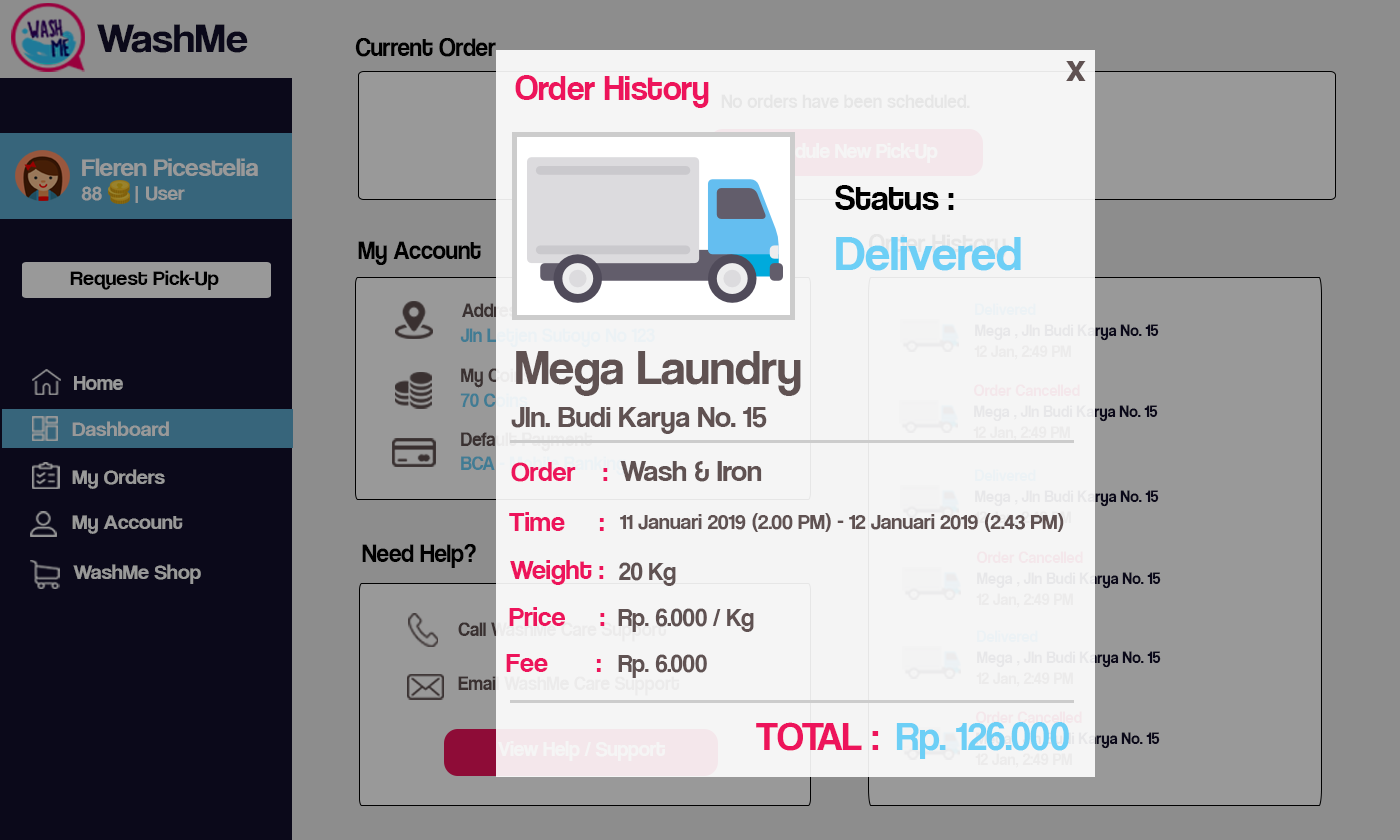
<style>
.page{position:relative;width:1400px;height:840px;background:#8d8d8d}
.page>*{position:absolute;margin:0}
.t1{font:42.1px "CoolveticaRg-Regular";color:#120f2b;scale:1.05 1}
.t2{font:25.5px "CoolveticaRg-Regular";color:#000000;scale:0.96 1}
.t3{font:40px "CoolveticaRg-Regular";color:#605252}
.t4{font:35px "CoolveticaRg-Regular";color:#ed145b}
.t5{font:19.9px "CoolveticaRg-Regular";color:#e6e6e6;scale:0.96 1}
.t6{font:21.3px "CoolveticaRg-Regular";color:#ffffff;scale:0.96 1}
.t7{font:25.2px "CoolveticaRg-Regular";color:#999999;scale:1.05 1}
.t8{font:20px "CoolveticaRg-Regular";color:#999999;scale:1.05 1}
.t9{font:50px "CoolveticaRg-Regular";color:#6dcff6}
.t10{font:36px "CoolveticaRg-Regular";color:#000000}
.t11{font:25.5px "CoolveticaRg-Regular";scale:0.96 1}
.t12{font:21px "CoolveticaRg-Regular";color:#000000;scale:1.05 1}
.t13{font:19.9px "CoolveticaRg-Regular";scale:0.96 1}
.t14{font:17px "CoolveticaRg-Regular";color:#ecf2f5;scale:0.96 1}
.t15{font:50px "CoolveticaRg-Regular";color:#605252}
.t16{font:17px "CoolveticaRg-Regular";color:#ecebeb;scale:0.96 1}
.t17{font:21px "CoolveticaRg-Regular";color:#999999}
.t18{font:17px "CoolveticaRg-Regular";color:#f4e7eb;scale:0.96 1}
.t19{font:30px "CoolveticaRg-Regular";color:#605252}
.t20{font:21px "CoolveticaRg-Regular";color:#999999;scale:1.05 1}
.t21{font:28px "CoolveticaRg-Regular";color:#ed145b}
.t22{font:21.7px "CoolveticaRg-Regular";color:#605252}
.t23{font:25px "CoolveticaRg-Regular";color:#605252}
.t24{font:40px "CoolveticaRg-Regular";color:#ed145b}
.t25{font:40px "CoolveticaRg-Regular";color:#6dcff6}
</style>
<div class="page">
<p class="t1" style="left:97px;top:24px;width:151px;height:29px">WashMe</p>
<p class="t2" style="left:355px;top:38px;width:141px;height:19px">Current Order</p>
<p class="t3" style="left:1066px;top:61px;width:20px;height:20px">x</p>
<p class="t4" style="left:515px;top:75px;width:194px;height:33px">Order History</p>
<p class="t5" style="left:721px;top:94px;width:249px;height:14px">No orders have been scheduled.</p>
<p class="t6" style="left:753px;top:143px;width:185px;height:20px">Schedule New Pick-Up</p>
<p class="t7" style="left:81px;top:158px;width:177px;height:45px">Fleren Picestelia<br><span class="t8">88      | User</span></p>
<p class="t9" style="left:835px;top:185px;width:186px;height:86px"><span class="t10">Status :<br></span>Delivered</p>
<p class="t2" style="left:358px;top:241px;width:123px;height:24px">My Account</p>
<p class="t11" style="left:868px;top:234px;width:138px;height:24px">Order History</p>
<p class="t12" style="left:70px;top:270px;width:149px;height:20px">Request Pick-Up</p>
<p class="t13" style="left:462px;top:303px;width:65px;height:14px">Address</p>
<p class="t14" style="left:975px;top:303px;width:61px;height:12px">Delivered</p>
<p class="t15" style="left:516px;top:351px;width:285px;height:45px">Mega Laundry</p>
<p class="t16" style="left:974px;top:345px;width:97px;height:15px">12 Jan, 2:49 PM</p>
<p class="t17" style="left:74px;top:376px;width:49px;height:14px">Home</p>
<p class="t13" style="left:461px;top:368px;width:71px;height:20px">My Coins</p>
<p class="t18" style="left:973px;top:384px;width:107px;height:12px">Order Cancelled</p>
<p class="t19" style="left:511px;top:407px;width:256px;height:27px">Jln. Budi Karya No. 15</p>
<p class="t20" style="left:72px;top:421px;width:97px;height:15px">Dashboard</p>
<p class="t21" style="left:511px;top:462px;width:97px;height:20px">Order    :</p>
<p class="t19" style="left:620px;top:461px;width:142px;height:21px">Wash &amp; Iron</p>
<p class="t20" style="left:72px;top:469px;width:93px;height:20px">My Orders</p>
<p class="t14" style="left:975px;top:469px;width:61px;height:12px">Delivered</p>
<p class="t20" style="left:72px;top:515px;width:111px;height:19px">My Account</p>
<p class="t21" style="left:509px;top:512px;width:95px;height:19px">Time     :</p>
<p class="t22" style="left:620px;top:513px;width:444px;height:19px">11 Januari 2019 (2.00 PM) - 12 Januari 2019 (2.43 PM)</p>
<p class="t2" style="left:362px;top:544px;width:114px;height:24px">Need Help?</p>
<p class="t18" style="left:976px;top:551px;width:107px;height:12px">Order Cancelled</p>
<p class="t20" style="left:73px;top:564px;width:128px;height:20px">WashMe Shop</p>
<p class="t21" style="left:510px;top:560px;width:94px;height:25px">Weight :</p>
<p class="t23" style="left:619px;top:562px;width:57px;height:24px">20 Kg</p>
<p class="t16" style="left:976px;top:593px;width:97px;height:15px">12 Jan, 2:49 PM</p>
<p class="t21" style="left:509px;top:607px;width:96px;height:19px">Price     :</p>
<p class="t23" style="left:618px;top:608px;width:136px;height:24px">Rp. 6.000 / Kg</p>
<p class="t14" style="left:977px;top:630px;width:61px;height:12px">Delivered</p>
<p class="t21" style="left:506px;top:654px;width:95px;height:18px">Fee       :</p>
<p class="t23" style="left:618px;top:654px;width:89px;height:24px">Rp. 6.000</p>
<p class="t16" style="left:976px;top:672px;width:97px;height:15px">12 Jan, 2:49 PM</p>
<p class="t18" style="left:975px;top:711px;width:107px;height:12px">Order Cancelled</p>
<p class="t24" style="left:756px;top:722px;width:123px;height:29px">TOTAL :</p>
<p class="t25" style="left:896px;top:722px;width:173px;height:37px">Rp. 126.000</p>
<p class="t6" style="left:498px;top:741px;width:167px;height:20px">View Help / Support</p>
<p class="t16" style="left:975px;top:753px;width:97px;height:15px">12 Jan, 2:49 PM</p>
</div>
